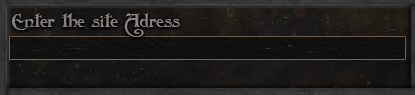
<style>
.page{position:relative;width:415px;height:95px}
.page>*{position:absolute;margin:0}
.t1{font:18.1px "Folkard";color:#88837e}
</style>
<div class="page">
<p class="t1" style="left:11px;top:13px;width:169px;height:24px">Enter the site Adress</p>
</div>
